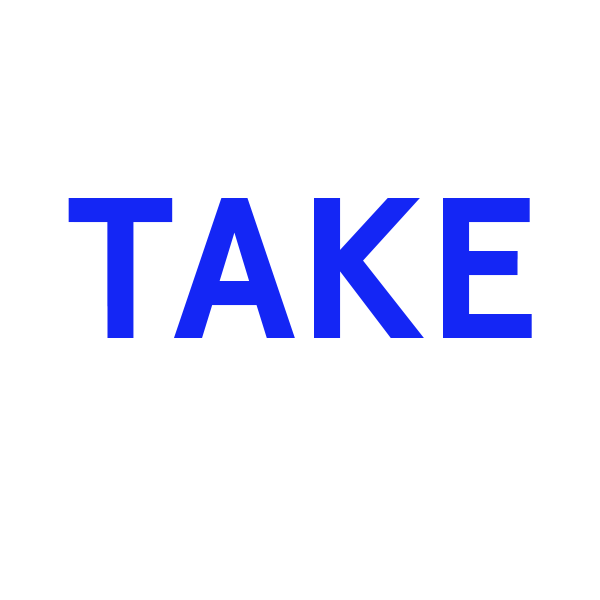
<style>
.page{position:relative;width:600px;height:600px;background:#ffffff}
.page>*{position:absolute;margin:0}
.t1{font:200px "Apercu-Bold";color:#1426f5}
</style>
<div class="page">
<p class="t1" style="left:68px;top:198px;width:464px;height:140px">TAKE</p>
</div>
